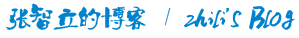
<style>
.page{position:relative;width:299px;height:38px;background:#ffffff}
.page>*{position:absolute;margin:0}
.t1{font:24px "Ò¶¸ùÓÑÌØÉ«¼òÌåÉý¼¶°æ";color:#0082cd}
.t2{font:24px "Bahnschrift";color:#0082cd}
</style>
<div class="page">
<p class="t1" style="left:6px;top:3px;width:289px;height:27px">张智立的博客  /  zhili<span class="t2">’</span>s Blog</p>
</div>
